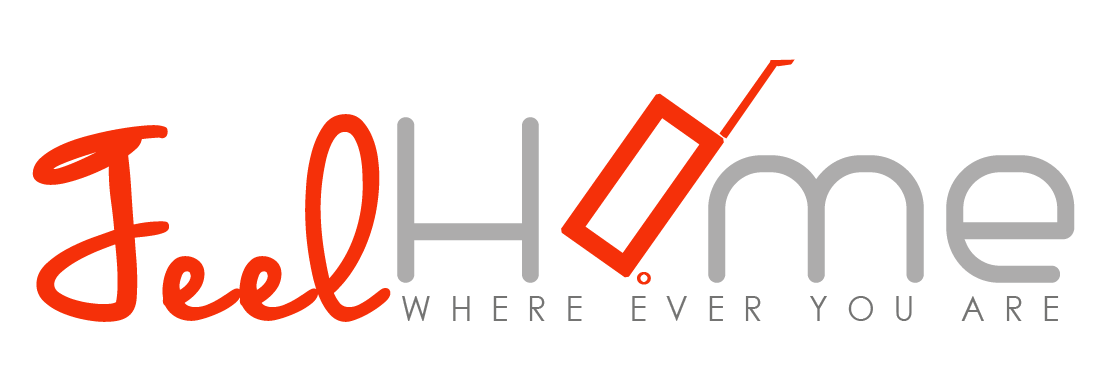
<style>
.page{position:relative;width:1112px;height:378px;background:#ffffff}
.page>*{position:absolute;margin:0}
.t1{font:205.3px "MSOutlook";color:#f53009;font-weight:bold}
.t2{font:366.7px "WeddingChardonnay";color:#f53009;font-weight:bold}
.t3{font:279.6px "Trench-Thin";color:#adacac;font-weight:bold}
.t4{font:279.6px "Trench-Thin";color:#000000;font-weight:bold}
.t5{font:30.3px "TwCenMT-Regular";color:#f53009;font-weight:bold}
.t6{font:35px "CenturyGothic";letter-spacing:0.6em;color:#747473;scale:0.91 1}
</style>
<div class="page">
<p class="t1" style="left:561px;top:93px;width:163px;height:185px;rotate:35deg">o</p>
<p class="t2" style="left:32px;top:114px;width:359px;height:208px">Feel</p>
<p class="t3" style="left:397px;top:117px;width:678px;height:166px"><span class="t4"> </span>H  me</p>
<p class="t5" style="left:637px;top:272px;width:14px;height:13px">o</p>
<p class="t6" style="left:402px;top:296px;width:657px;height:25px">WHERE EVER YOU ARE</p>
</div>
